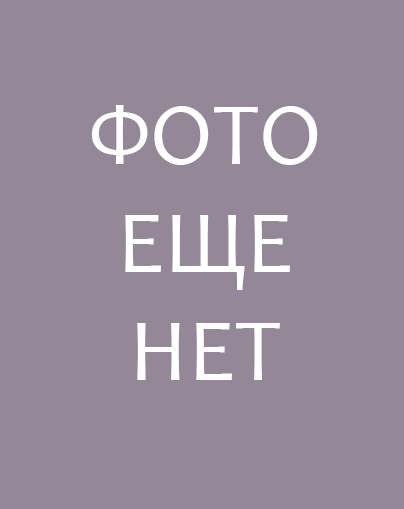
<style>
.page{position:relative;width:404px;height:509px;background:#948798}
.page>*{position:absolute;margin:0}
.t1{font:90px "Candara";color:#ffffff}
</style>
<div class="page">
<p class="t1" style="left:91px;top:105px;width:227px;height:275px;text-align:center">ФОТО<br>ЕЩЕ<br>НЕТ</p>
</div>
